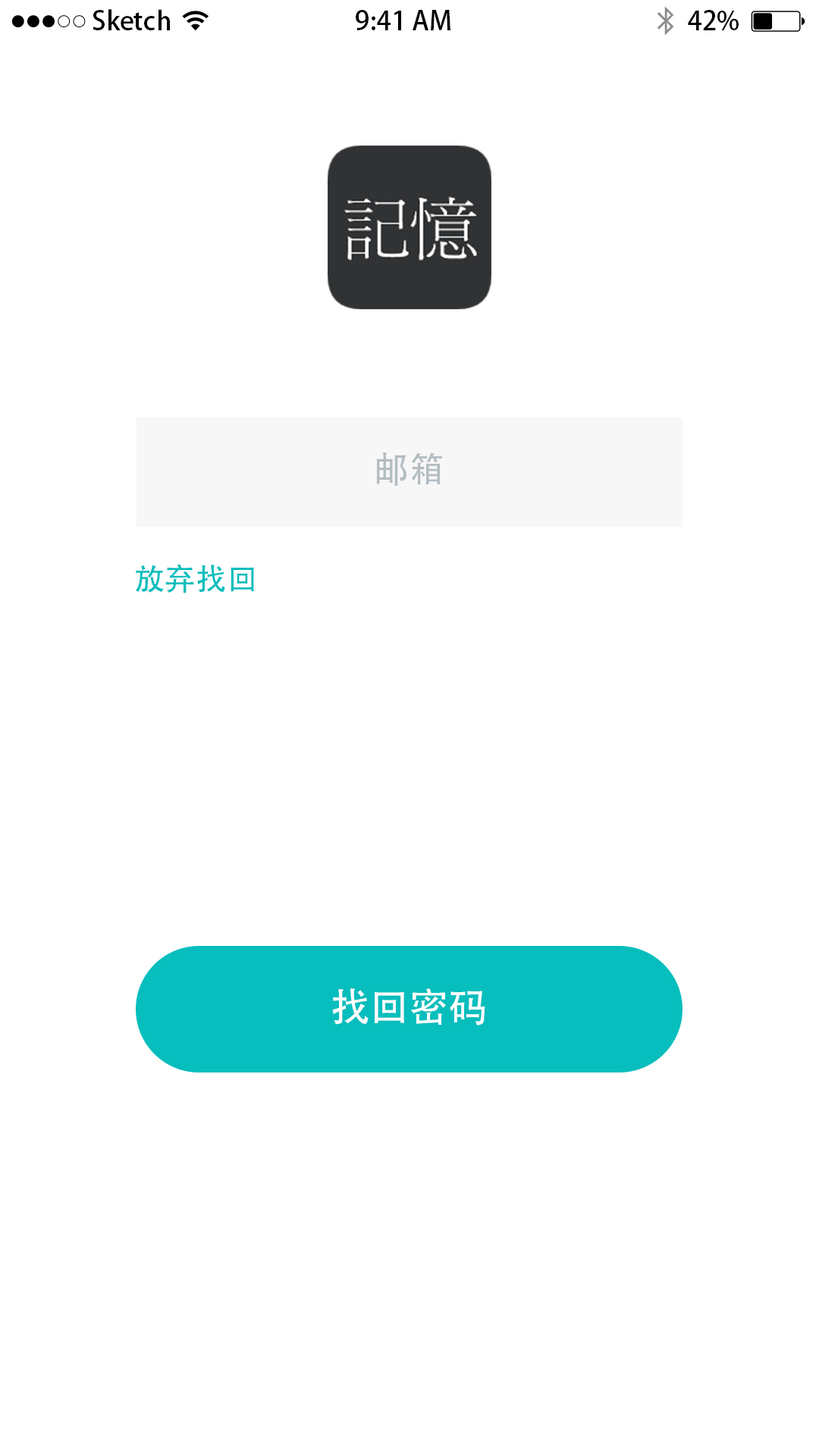
<style>
.page{position:relative;width:819px;height:1456px;background:#ffffff}
.page>*{position:absolute;margin:0}
.t1{font:26.2px "AdobeHeitiStd-Regular";color:#000000}
.t2{font:34.9px "AdobeHeitiStd-Regular";letter-spacing:0.015em;color:#b3bdc2}
.t3{font:30.6px "AdobeHeitiStd-Regular";letter-spacing:0.01em;color:#06bebd}
.t4{font:39.3px "AdobeHeitiStd-Regular";letter-spacing:-0.005em;color:#ffffff}
</style>
<div class="page">
<p class="t1" style="left:92px;top:9px;width:78px;height:21px">Sketch</p>
<p class="t1" style="left:356px;top:10px;width:94px;height:20px">9:41 AM</p>
<p class="t1" style="left:688px;top:10px;width:50px;height:21px">42%</p>
<p class="t2" style="left:376px;top:453px;width:66px;height:33px">邮箱</p>
<p class="t3" style="left:135px;top:564px;width:119px;height:30px">放弃找回</p>
<p class="t4" style="left:332px;top:989px;width:153px;height:37px">找回密码</p>
</div>
